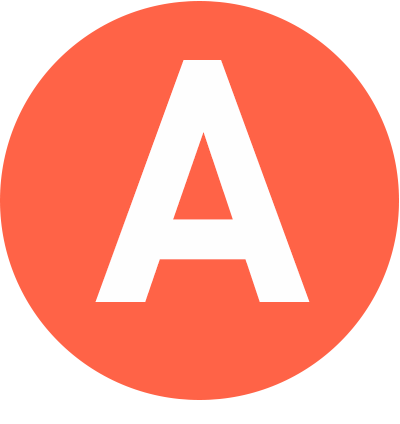
<style>
.page{position:relative;width:400px;height:424px;background:#ff6347}
.page>*{position:absolute;margin:0}
.t1{font:340px "DINOT-Bold";letter-spacing:-0.02em;color:#fefefe}
</style>
<div class="page">
<p class="t1" style="left:95px;top:60px;width:215px;height:242px">A</p>
</div>
